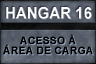
<style>
.page{position:relative;width:96px;height:64px}
.page>*{position:absolute;margin:0}
.t1{font:10.3px/10px "Arial-BoldMT";color:#000000;text-transform:uppercase;font-weight:bold}
</style>
<div class="page">
<p class="t1" style="left:3px;top:34px;width:90px;height:21px;text-align:center">ACESSO À<br>ÁREA DE CARGA</p>
</div>
